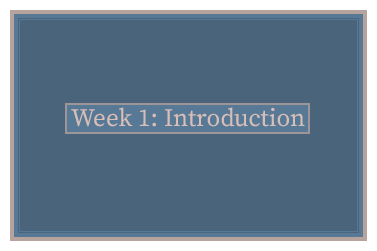
<style>
.page{position:relative;width:377px;height:251px;background:#49647b}
.page>*{position:absolute;margin:0}
.t1{font:25px "SourceSerifRoman-Regular";color:#d7bfb9}
</style>
<div class="page">
<p class="t1" style="left:71px;top:107px;width:234px;height:20px">Week 1: Introduction</p>
</div>
